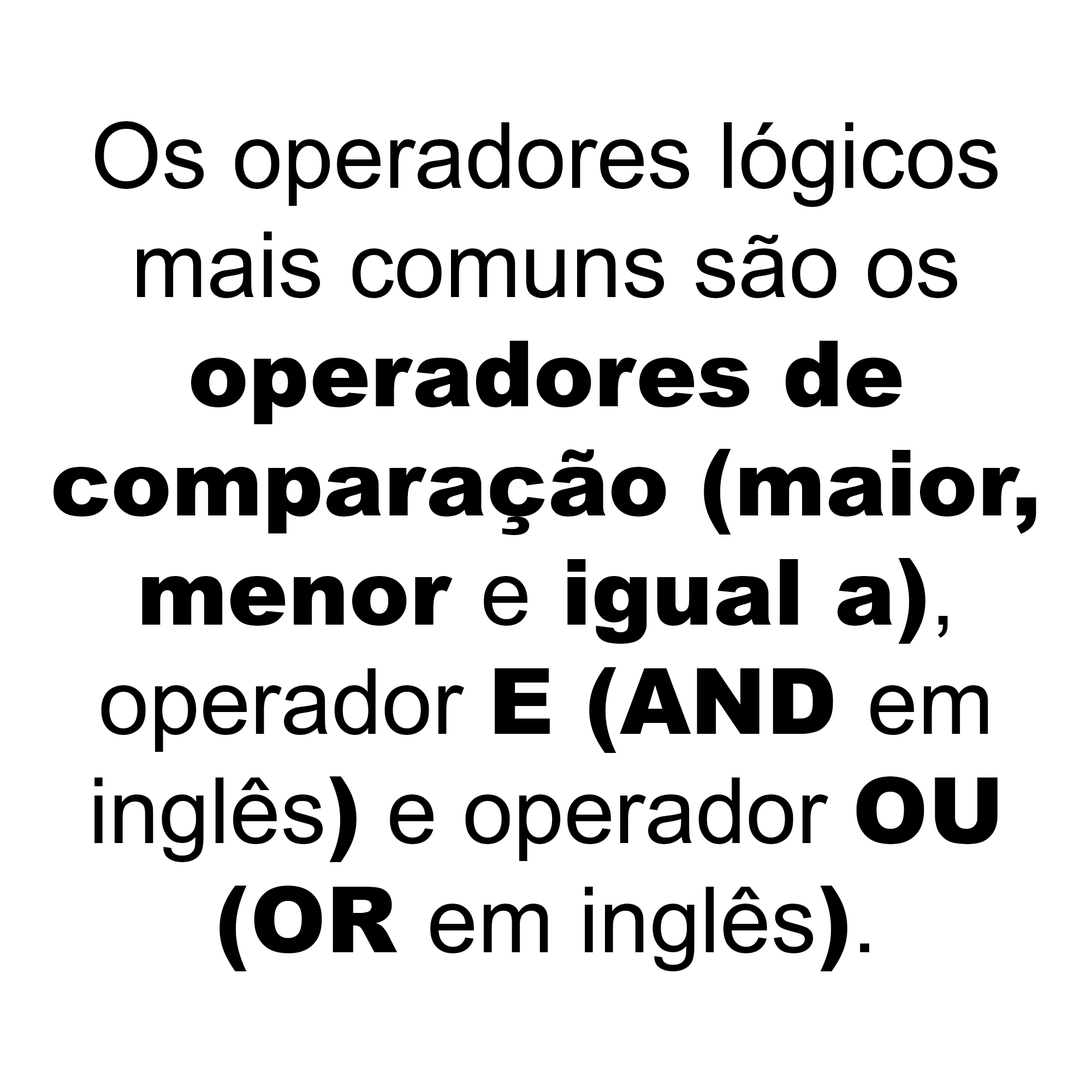
<style>
.page{position:relative;width:1092px;height:1092px;background:#ffffff}
.page>*{position:absolute;margin:0}
.t1{font:91px "ArialMT";color:#000000}
.t2{font:91px "Arial-Black";color:#000000}
</style>
<div class="page">
<p class="t1" style="left:54px;top:121px;width:982px;height:850px;text-align:center">Os operadores lógicos<br>mais comuns são os<br><span class="t2">operadores de<br>comparação (maior,<br>menor </span>e<span class="t2"> igual a)</span>,<br>operador <span class="t2">E (AND </span>em<br>inglês<span class="t2">)</span> e operador <span class="t2">OU<br>(OR </span>em inglês<span class="t2">)</span>.</p>
</div>
